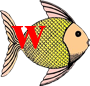
<style>
.page{position:relative;width:90px;height:86px;background:#ffffff}
.page>*{position:absolute;margin:0}
.t1{font:48px "TimesNewRomanPS-BoldMT";color:#ff0000}
</style>
<div class="page">
<p class="t1" style="left:11px;top:26px;width:35px;height:23px">w</p>
</div>
